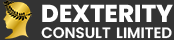
<style>
.page{position:relative;width:174px;height:40px;background:#333333}
.page>*{position:absolute;margin:0}
.t1{font:15.2px/16.7px "Poppins-SemiBold";color:#ffffff;text-transform:uppercase}
.t2{font:24.4px/16.7px "Poppins-ExtraBold";color:#ffffff;text-transform:uppercase}
</style>
<div class="page">
<p class="t1" style="left:41px;top:4px;width:132px;height:35px"><span class="t2">Dexterity<br></span>consult limited</p>
</div>
